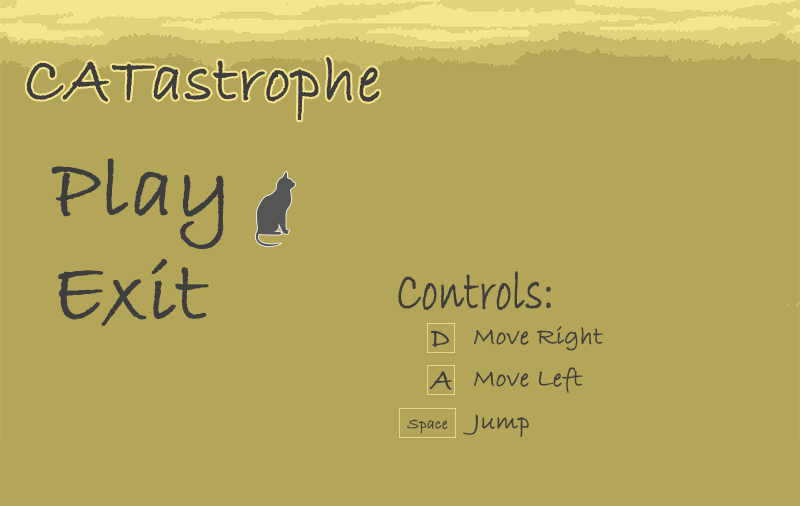
<style>
.page{position:relative;width:800px;height:506px;background:#b4a658}
.page>*{position:absolute;margin:0}
.t1{font:64.2px "BradleyHandITC";color:#3f3e3e;font-weight:bold}
.t2{font:57.3px "BradleyHandITC";color:#3f3e3e;font-weight:bold;scale:0.69 1}
.t3{font:25.2px "BradleyHandITC";color:#3f3e3e;font-weight:bold}
.t4{font:29.9px "BradleyHandITC";color:#3f3e3e;font-weight:bold}
.t5{font:15.7px "BradleyHandITC";color:#3f3e3e;font-weight:bold}
</style>
<div class="page">
<p class="t1" style="left:26px;top:56px;width:354px;height:65px">CATastrophe</p>
<p class="t2" style="left:398px;top:271px;width:153px;height:39px">Controls:</p>
<p class="t3" style="left:474px;top:326px;width:129px;height:25px">Move Right</p>
<p class="t4" style="left:431px;top:330px;width:19px;height:18px">D</p>
<p class="t4" style="left:430px;top:371px;width:22px;height:19px">A</p>
<p class="t3" style="left:474px;top:367px;width:109px;height:26px">Move Left</p>
<p class="t3" style="left:463px;top:414px;width:66px;height:23px">Jump</p>
<p class="t5" style="left:407px;top:419px;width:41px;height:15px">Space</p>
</div>
